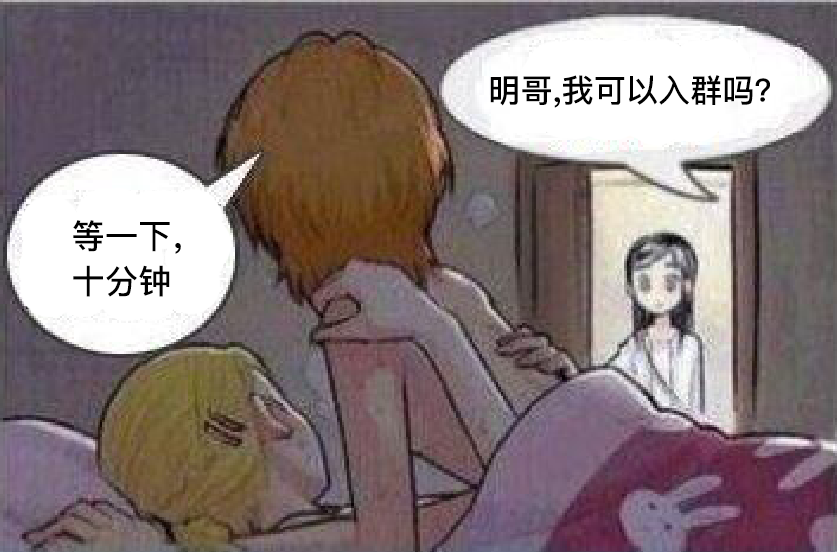
<style>
.page{position:relative;width:837px;height:552px}
.page>*{position:absolute;margin:0}
.t1{font:32.2px "PingFangSC-Medium";color:#000000}
.t2{font:33.3px/45.3px "PingFangSC-Medium";color:#000000}
</style>
<div class="page">
<p class="t1" style="left:490px;top:75px;width:280px;height:33px">明哥,我可以入群吗？</p>
<p class="t2" style="left:73px;top:220px;width:108px;height:77px">等一下，<br>十分钟</p>
</div>
